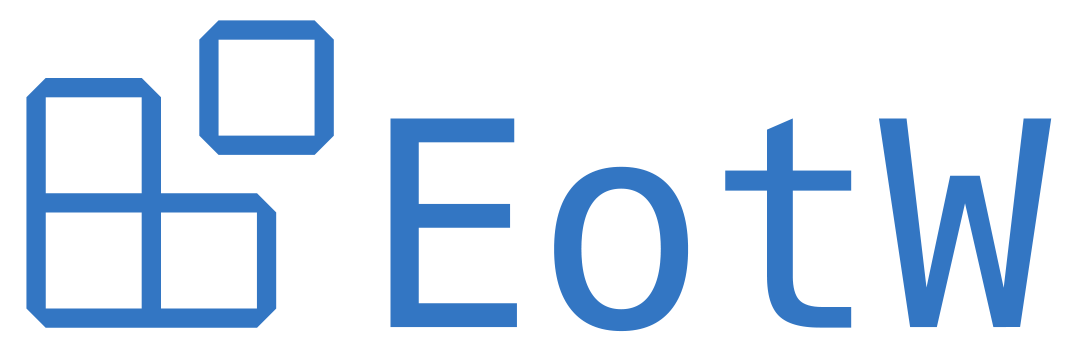
<style>
.page{position:relative;width:1086px;height:357px;background:#ffffff}
.page>*{position:absolute;margin:0}
.t1{font:286.2px "HackNerdFontComplete-Regular";color:#3376c3}
</style>
<div class="page">
<p class="t1" style="left:390px;top:118px;width:662px;height:214px">EotW</p>
</div>
